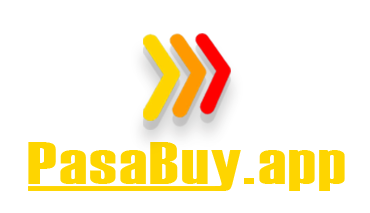
<style>
.page{position:relative;width:370px;height:213px;background:#ffffff}
.page>*{position:absolute;margin:0}
.t1{font:60.1px "Haettenschweiler";letter-spacing:0.03em;color:#fed500;scale:1.29 1}
</style>
<div class="page">
<p class="t1" style="left:28px;top:142px;width:317px;height:49px">PasaBuy.app</p>
</div>
